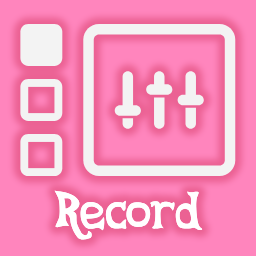
<style>
.page{position:relative;width:256px;height:256px;background:#ff85bd}
.page>*{position:absolute;margin:0}
.t1{font:58.1px "CelestiaReduxAltMedium";color:#ffffff}
</style>
<div class="page">
<p class="t1" style="left:54px;top:190px;width:149px;height:50px">Record</p>
<p class="t1" style="left:54px;top:190px;width:149px;height:50px">Record</p>
</div>
